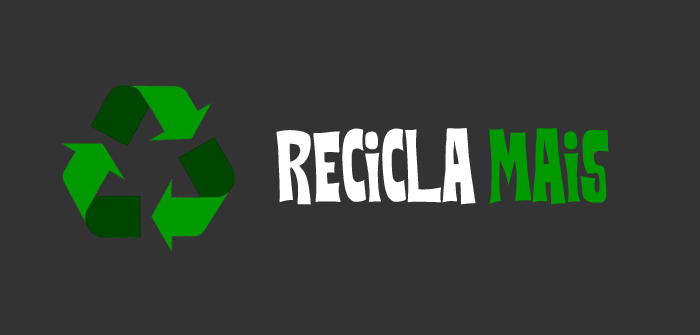
<style>
.page{position:relative;width:700px;height:335px;background:#333333}
.page>*{position:absolute;margin:0}
.t1{font:38.9px "FlowersKingdom";color:#ffffff}
.t2{font:38.9px "FlowersKingdom";color:#009900}
</style>
<div class="page">
<p class="t1" style="left:276px;top:128px;width:333px;height:77px">RECICLA <span class="t2">MAIS</span></p>
</div>
